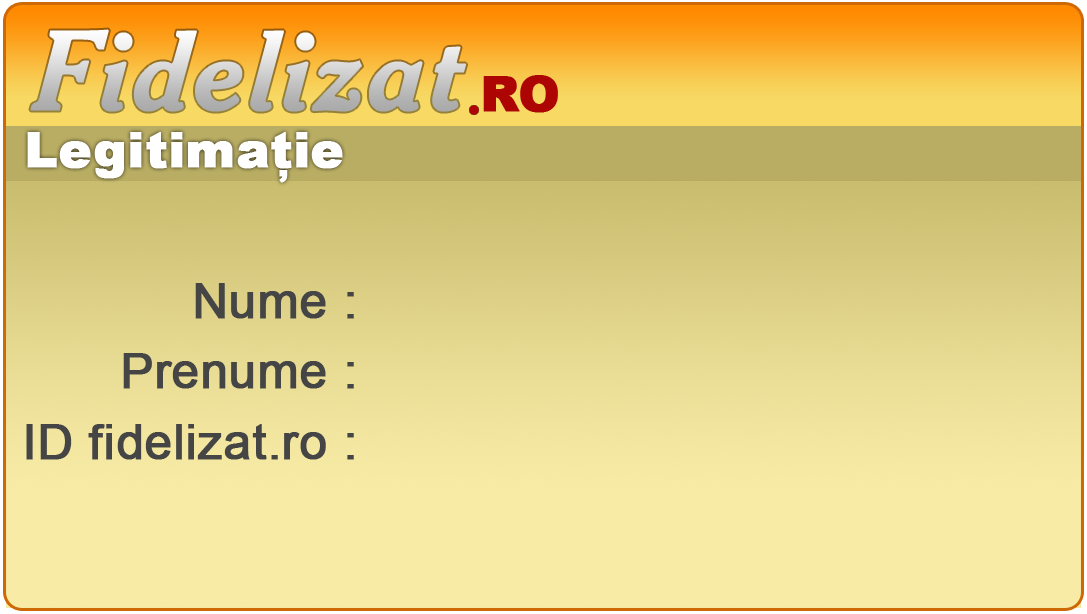
<style>
.page{position:relative;width:1087px;height:614px}
.page>*{position:absolute;margin:0}
.t1{font:108px "CheltenhamBT-BoldItalicHeadline";font-weight:bold}
.t2{font:49px "Arial-Black";color:#ad0404;font-weight:bold}
.t3{font:49px "Arial-Black";color:#ffffff;font-weight:bold}
.t4{font:49px/70.7px "ArialMT";color:#454545;font-weight:bold}
</style>
<div class="page">
<p class="t1" style="left:29px;top:28px;width:438px;height:85px">Fidelizat</p>
<p class="t2" style="left:483px;top:75px;width:75px;height:38px">RO</p>
<p class="t3" style="left:27px;top:132px;width:316px;height:51px">Legitimaţie</p>
<p class="t4" style="left:26px;top:283px;width:328px;height:177px;text-align:right">Nume :<br>Prenume :<br>ID fidelizat.ro :</p>
</div>
